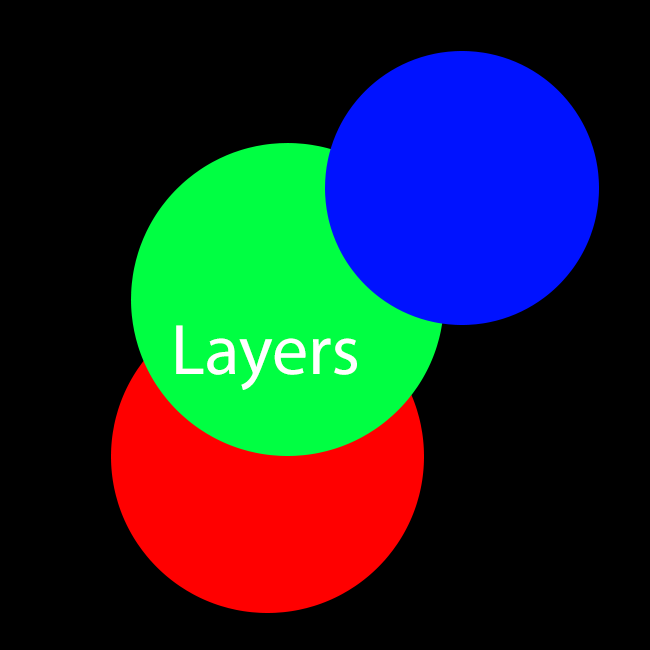
<style>
.page{position:relative;width:650px;height:650px;background:#000000}
.page>*{position:absolute;margin:0}
.t1{font:72px "MyriadPro-Regular";color:#ffffff}
</style>
<div class="page">
<p class="t1" style="left:176px;top:325px;width:181px;height:65px">Layers</p>
</div>
